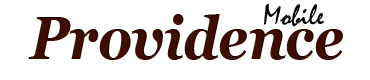
<style>
.page{position:relative;width:370px;height:80px;background:#ffffff}
.page>*{position:absolute;margin:0}
.t1{font:30px "Mistral";color:#000000}
.t2{font:60px "Georgia-BoldItalic";color:#3d0d00;scale:0.9 1}
</style>
<div class="page">
<p class="t1" style="left:264px;top:3px;width:60px;height:24px">Mobile</p>
<p class="t2" style="left:28px;top:14px;width:315px;height:46px">Providence</p>
</div>
